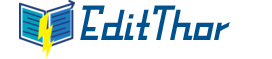
<style>
.page{position:relative;width:272px;height:59px;background:#ffffff}
.page>*{position:absolute;margin:0}
.t1{font:43.2px "Fabian-Regular";color:#00528e}
</style>
<div class="page">
<p class="t1" style="left:80px;top:5px;width:150px;height:35px">EditThor</p>
</div>
